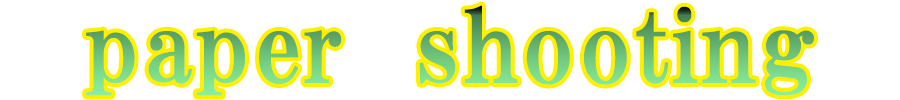
<style>
.page{position:relative;width:900px;height:100px;background:#ffffff}
.page>*{position:absolute;margin:0}
.t1{font:100.1px "HGPMinchoE";font-weight:bold}
</style>
<div class="page">
<p class="t1" style="left:86px;top:5px;width:728px;height:91px">paper　shooting</p>
</div>
